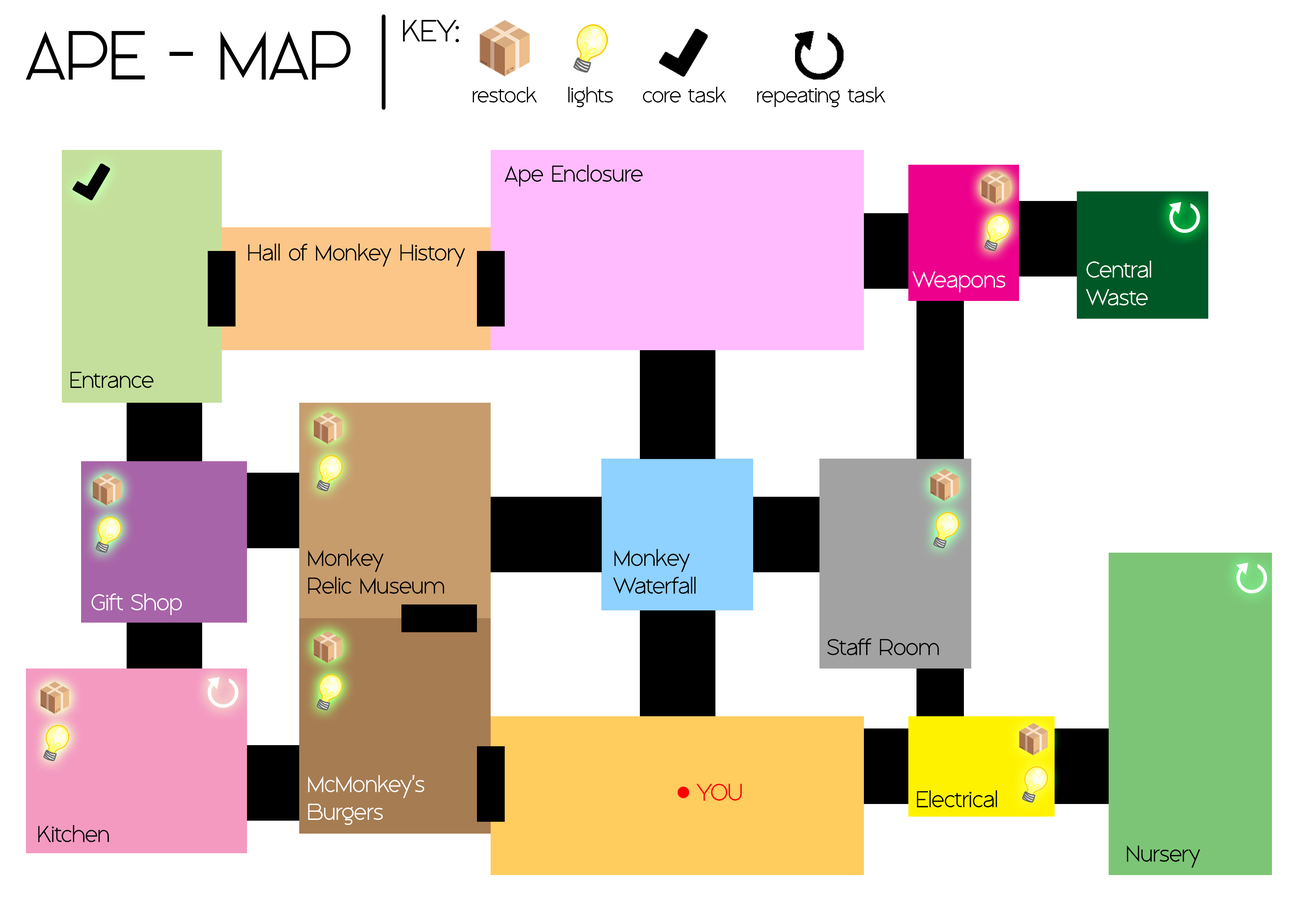
<style>
.page{position:relative;width:1299px;height:918px;background:#ffffff}
.page>*{position:absolute;margin:0}
.t1{font:30.9px "PergolaDemo";color:#000000}
.t2{font:69.4px "PergolaDemo";color:#000000}
.t3{font:21.6px "PergolaDemo";color:#000000}
.t4{font:23.1px "PergolaDemo";color:#000000}
.t5{font:23.1px "PergolaDemo";color:#ffffff}
.t6{font:24.2px "PergolaDemo";color:#ff0000}
</style>
<div class="page">
<p class="t1" style="left:403px;top:20px;width:56px;height:23px">KEY:</p>
<p class="t2" style="left:26px;top:31px;width:325px;height:49px">APE - MAP</p>
<p class="t3" style="left:472px;top:87px;width:65px;height:16px">restock</p>
<p class="t3" style="left:568px;top:87px;width:45px;height:20px">lights</p>
<p class="t3" style="left:643px;top:87px;width:83px;height:16px">core task</p>
<p class="t3" style="left:757px;top:87px;width:129px;height:20px">repeating task</p>
<p class="t4" style="left:505px;top:165px;width:138px;height:22px">Ape Enclosure</p>
<p class="t4" style="left:248px;top:244px;width:217px;height:23px">Hall of Monkey History</p>
<p class="t5" style="left:1085px;top:261px;width:66px;height:44px">Central<br>Waste</p>
<p class="t5" style="left:912px;top:271px;width:93px;height:21px">Weapons</p>
<p class="t4" style="left:70px;top:372px;width:84px;height:16px">Entrance</p>
<p class="t4" style="left:308px;top:549px;width:136px;height:45px">Monkey<br>Relic Museum</p>
<p class="t4" style="left:613px;top:549px;width:83px;height:45px">Monkey<br>Waterfall</p>
<p class="t5" style="left:91px;top:593px;width:91px;height:22px">Gift Shop</p>
<p class="t4" style="left:827px;top:638px;width:112px;height:17px">Staff Room</p>
<p class="t5" style="left:308px;top:775px;width:116px;height:50px">McMonkey’s<br>Burgers</p>
<p class="t6" style="left:696px;top:784px;width:46px;height:17px">YOU</p>
<p class="t4" style="left:917px;top:790px;width:80px;height:17px">Electrical</p>
<p class="t4" style="left:38px;top:825px;width:71px;height:17px">Kitchen</p>
<p class="t4" style="left:1127px;top:845px;width:73px;height:23px">Nursery</p>
</div>
